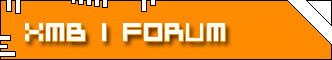
<style>
.page{position:relative;width:332px;height:60px;background:#ff8c00}
.page>*{position:absolute;margin:0}
.t1{font:28px "BitDustTwo";color:#ffffff}
</style>
<div class="page">
<p class="t1" style="left:25px;top:23px;width:200px;height:18px">XMB | FORUM</p>
</div>
